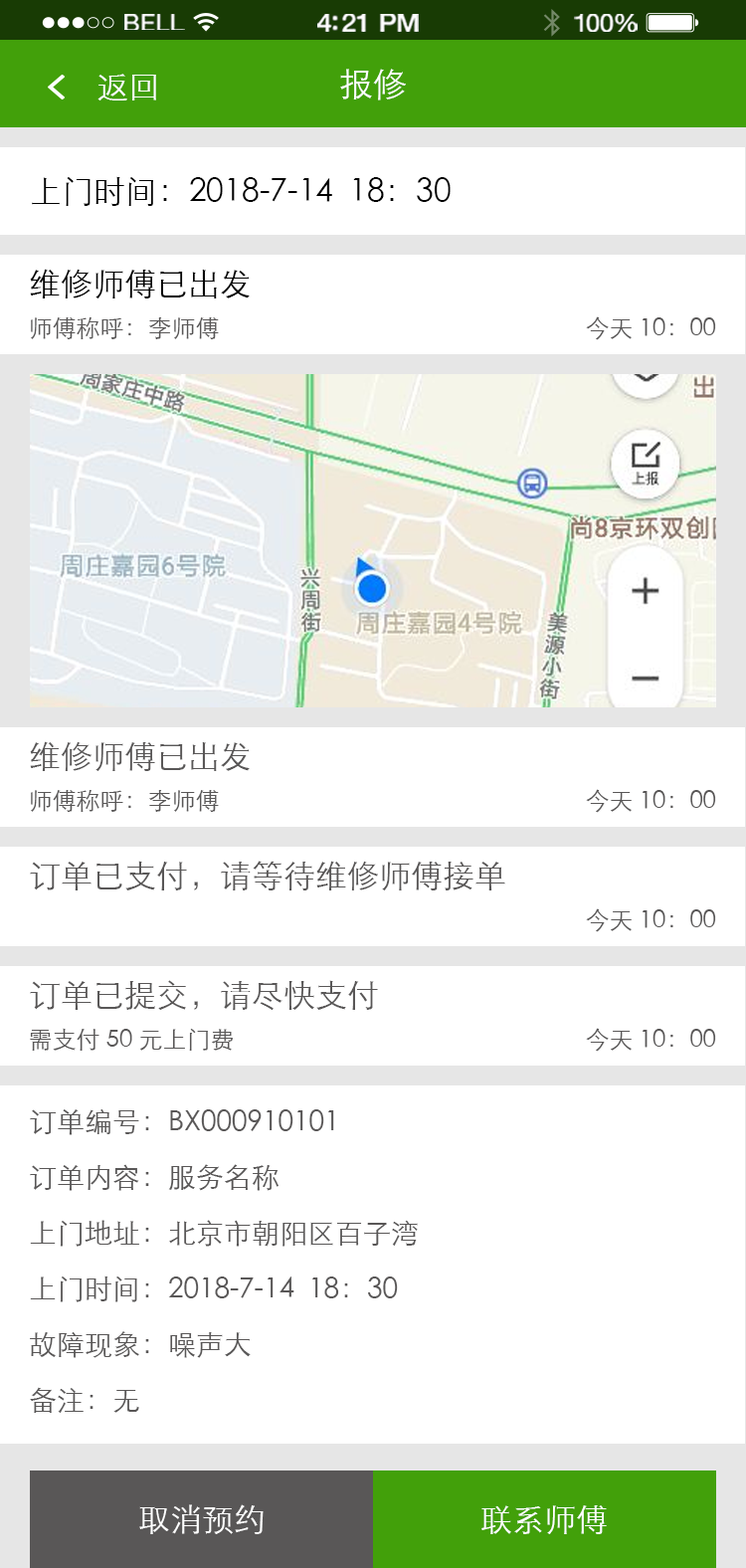
<style>
.page{position:relative;width:746px;height:1568px;background:#ffffff}
.page>*{position:absolute;margin:0}
.t1{font:23.1px "HelveticaNeue";letter-spacing:0.02em;color:#ffffff;scale:1.06 1}
.t2{font:25.2px "HelveticaNeue-Medium";letter-spacing:-0.02em;color:#ffffff;scale:1.06 1}
.t3{font:24.2px "HelveticaNeue";letter-spacing:-0.02em;color:#ffffff;scale:1.06 1}
.t4{font:31.8px "STXihei";color:#ffffff}
.t5{font:33.8px "STXihei";color:#ffffff}
.t6{font:31.8px "STXihei";color:#000000}
.t7{font:23.9px "STXihei";color:#595757}
.t8{font:31.8px "STXihei";color:#595757}
.t9{font:27.9px/55.7px "STXihei";color:#595757}
</style>
<div class="page">
<p class="t1" style="left:124px;top:14px;width:61px;height:16px">BELL</p>
<p class="t2" style="left:317px;top:14px;width:102px;height:18px">4:21 PM</p>
<p class="t3" style="left:574px;top:14px;width:64px;height:18px">100%</p>
<p class="t4" style="left:98px;top:74px;width:58px;height:26px">返回</p>
<p class="t5" style="left:340px;top:69px;width:66px;height:31px">报修</p>
<p class="t6" style="left:32px;top:176px;width:419px;height:30px">上门时间：2018-7-14  18：30</p>
<p class="t6" style="left:30px;top:269px;width:220px;height:29px">维修师傅已出发</p>
<p class="t7" style="left:31px;top:317px;width:188px;height:22px">师傅称呼：李师傅</p>
<p class="t7" style="left:586px;top:316px;width:130px;height:24px">今天 10：00</p>
<p class="t8" style="left:30px;top:741px;width:220px;height:30px">维修师傅已出发</p>
<p class="t7" style="left:31px;top:790px;width:188px;height:22px">师傅称呼：李师傅</p>
<p class="t7" style="left:586px;top:789px;width:130px;height:24px">今天 10：00</p>
<p class="t8" style="left:30px;top:861px;width:475px;height:29px">订单已支付，请等待维修师傅接单</p>
<p class="t7" style="left:586px;top:908px;width:130px;height:24px">今天 10：00</p>
<p class="t8" style="left:30px;top:980px;width:348px;height:30px">订单已提交，请尽快支付</p>
<p class="t7" style="left:30px;top:1028px;width:203px;height:23px">需支付 50 元上门费</p>
<p class="t7" style="left:586px;top:1028px;width:130px;height:24px">今天 10：00</p>
<p class="t9" style="left:30px;top:1109px;width:388px;height:304px">订单编号：BX000910101<br>订单内容：服务名称<br>上门地址：北京市朝阳区百子湾<br>上门时间：2018-7-14  18：30<br>故障现象：噪声大<br>备注：无</p>
<p class="t4" style="left:139px;top:1504px;width:125px;height:30px">取消预约</p>
<p class="t4" style="left:482px;top:1505px;width:125px;height:29px">联系师傅</p>
</div>
